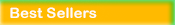
<style>
.page{position:relative;width:175px;height:25px;background:#ffba00}
.page>*{position:absolute;margin:0}
.t1{font:14.2px "ArialRoundedMTBold";color:#fdfcfc;scale:1.07 1}
</style>
<div class="page">
<p class="t1" style="left:10px;top:7px;width:87px;height:11px">Best Sellers</p>
</div>
